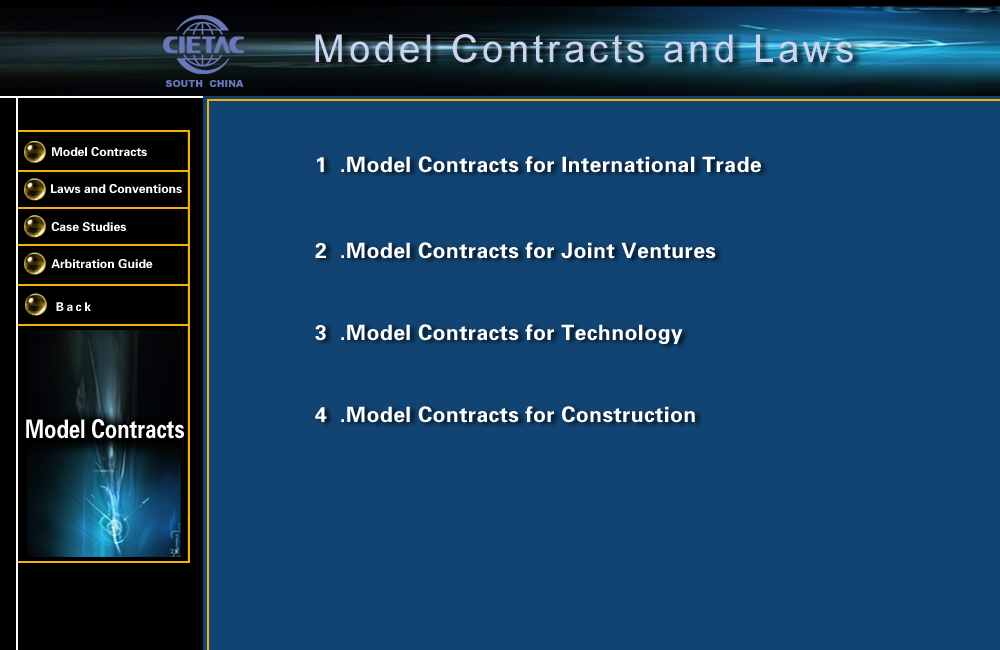
<style>
.page{position:relative;width:1000px;height:650px;background:#114473}
.page>*{position:absolute;margin:0}
.t1{font:38.2px "ArialMT";letter-spacing:0.1em;color:#cdd4ef}
.t2{font:12.2px "FZDHTJW--GB1-0";color:#ffffff}
.t3{font:21.2px/11.7px "FZDHTJW--GB1-0";letter-spacing:0.02em;color:#ffffff}
.t4{font:25.8px "FZDHTJW--GB1-0";color:#ffffff;scale:0.79 1}
</style>
<div class="page">
<p class="t1" style="left:315px;top:34px;width:538px;height:29px">Model Contracts and Laws</p>
<p class="t2" style="left:52px;top:147px;width:95px;height:9px">Model Contracts</p>
<p class="t3" style="left:315px;top:156px;width:446px;height:267px">1  .Model Contracts for International Trade<br><br><br><br><br><br><br>2  .Model Contracts for Joint Ventures<br><br><br><br><br><br><br>3  .Model Contracts for Technology<br><br><br><br><br><br><br>4  .Model Contracts for Construction</p>
<p class="t2" style="left:51px;top:184px;width:131px;height:9px">Laws and Conventions</p>
<p class="t2" style="left:51px;top:222px;width:75px;height:9px">Case Studies</p>
<p class="t2" style="left:51px;top:259px;width:102px;height:9px">Arbitration Guide</p>
<p class="t4" style="left:26px;top:419px;width:159px;height:20px">Model Contracts</p>
</div>
